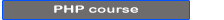
<style>
.page{position:relative;width:224px;height:20px;background:#6e6c6c}
.page>*{position:absolute;margin:0}
.t1{font:10.2px "ArialRoundedMTBold";color:#fcfcfc;scale:1.47 1}
</style>
<div class="page">
<p class="t1" style="left:54px;top:5px;width:84px;height:8px">PHP course</p>
</div>
